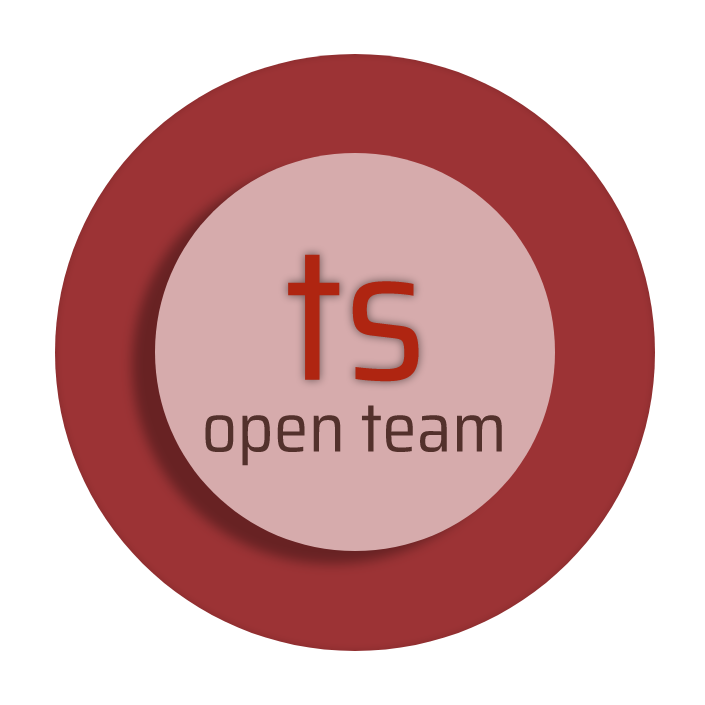
<style>
.page{position:relative;width:705px;height:705px;background:#ffffff}
.page>*{position:absolute;margin:0}
.t1{font:190px "SairaSemiCondensed-Regular";color:#af2511}
.t2{font:70px "SairaSemiCondensed-Regular";color:#53312c}
</style>
<div class="page">
<p class="t1" style="left:288px;top:254px;width:131px;height:128px">ts</p>
<p class="t2" style="left:205px;top:405px;width:297px;height:61px">open team</p>
</div>
